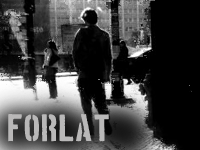
<style>
.page{position:relative;width:200px;height:150px;background:#000000}
.page>*{position:absolute;margin:0}
.t1{font:30px "BostonTraffic";letter-spacing:0.01em;color:#b9b8b8}
</style>
<div class="page">
<p class="t1" style="left:8px;top:113px;width:101px;height:29px">forlat</p>
</div>
